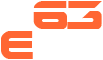
<style>
.page{position:relative;width:103px;height:60px;background:#ffffff}
.page>*{position:absolute;margin:0}
.t1{font:40px "EarthNormal";letter-spacing:-0.06em;color:#ff6633}
.t2{font:40px "EarthNormal";letter-spacing:-0.06em;color:#ffffff}
</style>
<div class="page">
<p class="t1" style="left:1px;top:1px;width:101px;height:28px"><span class="t2">e</span>63</p>
<p class="t2" style="left:1px;top:31px;width:101px;height:28px"><span class="t1">e</span>63</p>
</div>
